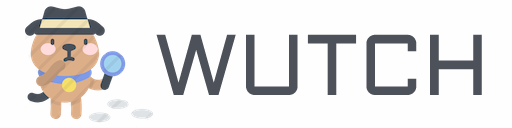
<style>
.page{position:relative;width:512px;height:128px;background:#fefefe}
.page>*{position:absolute;margin:0}
.t1{font:86px "Aldrich-Regular";color:#4c515a}
</style>
<div class="page">
<p class="t1" style="left:156px;top:34px;width:326px;height:61px">WUTCH</p>
</div>
